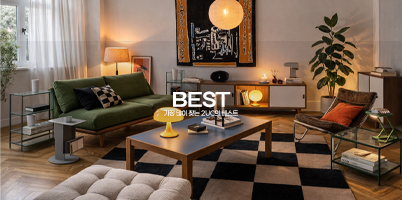
<style>
.page{position:relative;width:402px;height:200px}
.page>*{position:absolute;margin:0}
.t1{font:22.7px "Syne-SemiBold";letter-spacing:-0.04em;color:#ffffff}
.t2{font:6.3px "Paperlogy-2ExtraLight";color:#ffffff}
</style>
<div class="page">
<p class="t1" style="left:173px;top:91px;width:58px;height:17px">BEST</p>
<p class="t2" style="left:164px;top:110px;width:74px;height:6px">가장 많이 찾는 2UC의 베스트</p>
</div>
